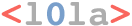
<style>
.page{position:relative;width:132px;height:26px;background:#ffffff}
.page>*{position:absolute;margin:0}
.t1{font:36px "Courier-Bold";color:#adadad}
.t2{font:36px "Courier-Bold";color:#f9665e}
.t3{font:36px "Courier-Bold";color:#799fcb}
</style>
<div class="page">
<p class="t1" style="left:1px;top:2px;width:129px;height:24px"><span class="t2">&lt;</span>l<span class="t3">0</span>la<span class="t2">&gt;</span></p>
</div>
